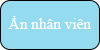
<style>
.page{position:relative;width:100px;height:50px;background:#94dbf0}
.page>*{position:absolute;margin:0}
.t1{font:15.3px "TimesNewRomanPSMT";color:#fefefe}
</style>
<div class="page">
<p class="t1" style="left:8px;top:16px;width:83px;height:13px">Ẩn nhân viên</p>
</div>
